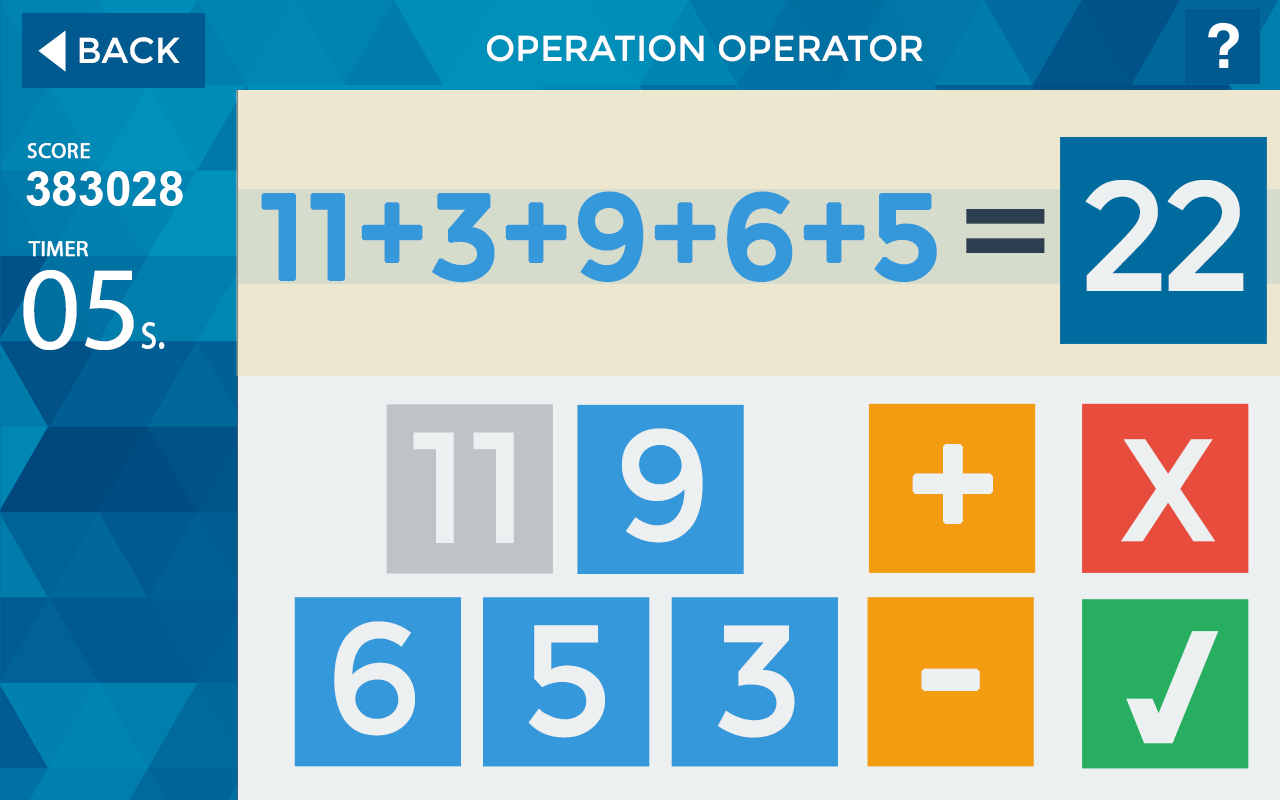
<style>
.page{position:relative;width:1280px;height:800px;background:#ecf0f1}
.page>*{position:absolute;margin:0}
.t1{font:36px "Montserrat-Regular";color:#ffffff}
.t2{font:36px "Montserrat-Regular";color:#ffffff;text-transform:uppercase}
.t3{font:22px "MyriadPro-Regular";color:#ffffff;font-weight:bold}
.t4{font:48px "Arial-BoldMT";color:#ffffff}
.t5{font:155px "Montserrat-Regular";letter-spacing:-0.06em;color:#ecf0f1;text-transform:uppercase}
.t6{font:155px "Montserrat-Regular";letter-spacing:-0.06em;color:#2d3e50;text-transform:uppercase}
.t7{font:120px "Montserrat-Regular";color:#3598db;text-transform:uppercase;font-weight:bold}
.t8{font:120px "MyriadPro-Regular";color:#ffffff}
.t9{font:55px "MyriadPro-Regular";color:#ffffff;scale:0.8 1}
.t10{font:158.2px "Montserrat-Regular";color:#ecf0f1;text-transform:uppercase}
.t11{font:158.2px "Montserrat-Regular";color:#ecf0f1;text-transform:uppercase;font-weight:bold}
.t12{font:145.4px "Montserrat-Regular";color:#ecf0f1;text-transform:uppercase}
</style>
<div class="page">
<p class="t1" style="left:79px;top:37px;width:101px;height:27px">BACK</p>
<p class="t2" style="left:486px;top:35px;width:437px;height:27px">Operation Operator</p>
<p class="t3" style="left:27px;top:143px;width:63px;height:16px">SCORE</p>
<p class="t4" style="left:26px;top:171px;width:157px;height:35px">383028</p>
<p class="t5" style="left:966px;top:180px;width:278px;height:111px"><span class="t6">= </span>22</p>
<p class="t7" style="left:261px;top:191px;width:676px;height:92px">11+3+9+6+5</p>
<p class="t3" style="left:28px;top:241px;width:60px;height:16px">TIMER</p>
<p class="t8" style="left:23px;top:270px;width:111px;height:80px">05</p>
<p class="t9" style="left:141px;top:322px;width:24px;height:27px">s.</p>
<p class="t10" style="left:413px;top:432px;width:101px;height:111px">11</p>
<p class="t10" style="left:622px;top:428px;width:81px;height:115px">9</p>
<p class="t11" style="left:912px;top:444px;width:81px;height:80px">+</p>
<p class="t12" style="left:1121px;top:439px;width:94px;height:103px">x</p>
<p class="t10" style="left:334px;top:621px;width:81px;height:115px">6</p>
<p class="t10" style="left:528px;top:625px;width:77px;height:113px">5</p>
<p class="t10" style="left:718px;top:625px;width:77px;height:113px">3</p>
<p class="t11" style="left:921px;top:668px;width:59px;height:23px">-</p>
</div>
